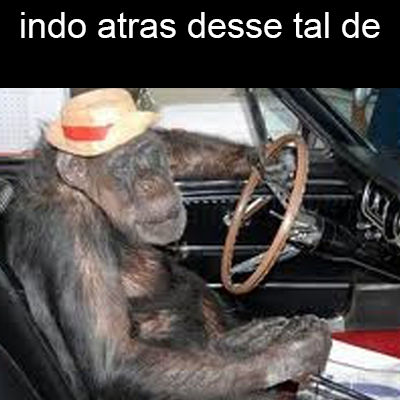
<style>
.page{position:relative;width:400px;height:400px}
.page>*{position:absolute;margin:0}
.t1{font:36px "ArialMT";color:#ffffff}
</style>
<div class="page">
<p class="t1" style="left:21px;top:12px;width:359px;height:26px">indo atras desse tal de</p>
</div>
